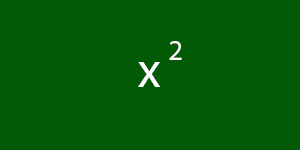
<style>
.page{position:relative;width:300px;height:150px;background:#025a04}
.page>*{position:absolute;margin:0}
.t1{font:29.2px "MyriadPro-Regular";color:#ffffff}
.t2{font:50px "MyriadPro-Regular";color:#ffffff}
</style>
<div class="page">
<p class="t1" style="left:169px;top:41px;width:13px;height:19px">2</p>
<p class="t2" style="left:138px;top:62px;width:23px;height:25px">x</p>
</div>
